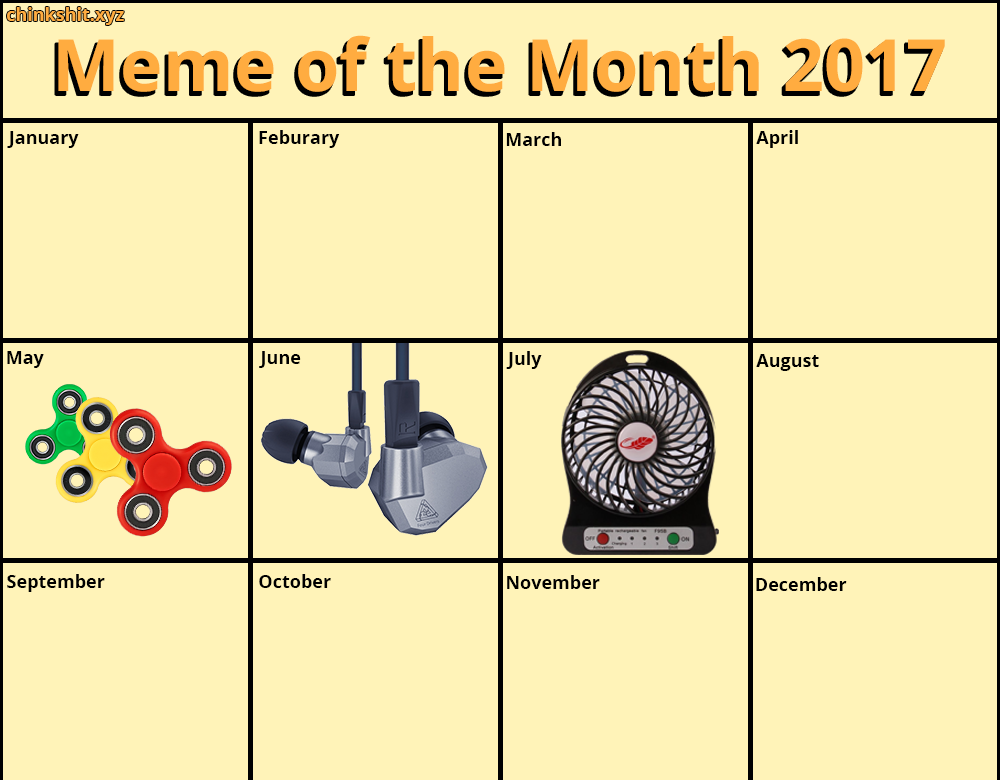
<style>
.page{position:relative;width:1000px;height:780px;background:#fff3b8}
.page>*{position:absolute;margin:0}
.t1{font:18px "OpenSans-Bold";color:#ffac40}
.t2{font:72.2px "OpenSans-Bold";color:#ffac40}
.t3{font:18px "OpenSans-Bold";color:#000000}
</style>
<div class="page">
<p class="t1" style="left:7px;top:7px;width:117px;height:18px">chinkshit.xyz</p>
<p class="t2" style="left:58px;top:35px;width:887px;height:57px">Meme of the Month 2017</p>
<p class="t3" style="left:7px;top:131px;width:72px;height:17px">January</p>
<p class="t3" style="left:259px;top:130px;width:81px;height:18px">Feburary</p>
<p class="t3" style="left:506px;top:132px;width:55px;height:14px">March</p>
<p class="t3" style="left:756px;top:130px;width:42px;height:18px">April</p>
<p class="t3" style="left:7px;top:351px;width:37px;height:17px">May</p>
<p class="t3" style="left:259px;top:351px;width:42px;height:17px">June</p>
<p class="t3" style="left:506px;top:351px;width:36px;height:18px">July</p>
<p class="t3" style="left:756px;top:354px;width:63px;height:17px">August</p>
<p class="t3" style="left:7px;top:574px;width:98px;height:18px">September</p>
<p class="t3" style="left:259px;top:574px;width:72px;height:14px">October</p>
<p class="t3" style="left:507px;top:575px;width:93px;height:14px">November</p>
<p class="t3" style="left:756px;top:577px;width:91px;height:14px">December</p>
</div>
